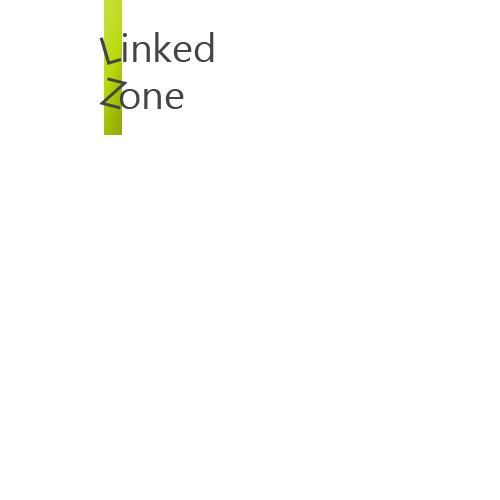
<style>
.page{position:relative;width:500px;height:500px;background:#ffffff}
.page>*{position:absolute;margin:0}
.t1{font:40px "SegoeUI";color:#454545}
</style>
<div class="page">
<p class="t1" style="left:99px;top:37px;width:23px;height:28px;rotate:-16deg">L</p>
<p class="t1" style="left:122px;top:32px;width:92px;height:30px">inked</p>
<p class="t1" style="left:99px;top:77px;width:29px;height:33px;rotate:14deg">Z</p>
<p class="t1" style="left:119px;top:89px;width:65px;height:20px">one</p>
</div>
